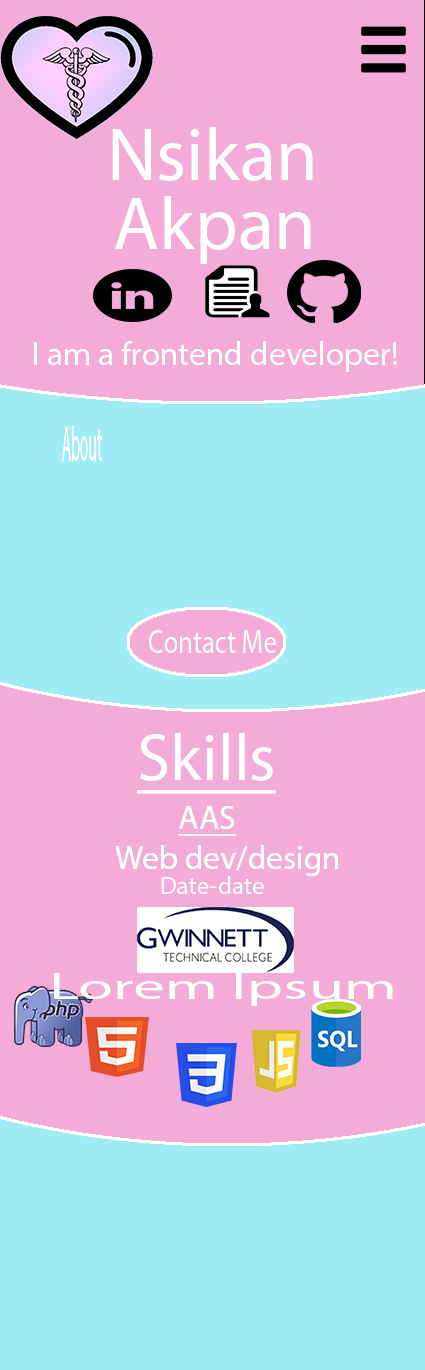
<style>
.page{position:relative;width:425px;height:1370px;background:#f3acd7}
.page>*{position:absolute;margin:0}
.t1{font:75px "MyriadPro-Regular";color:#ffffff}
.t2{font:33.3px "MyriadPro-Regular";color:#ffffff}
.t3{font:50px "MyriadPro-Regular";color:#ffffff;scale:0.31 1}
.t4{font:66.7px "MyriadPro-Regular";color:#ffffff;text-decoration:underline}
.t5{font:33.3px "MyriadPro-Regular";color:#ffffff;text-decoration:underline}
.t6{font:25px "MyriadPro-Regular";color:#ffffff}
.t7{font:37.4px "MyriadPro-Regular";color:#ffffff;scale:1.7 1}
</style>
<div class="page">
<p class="t1" style="left:112px;top:127px;width:201px;height:54px">Nsikan</p>
<p class="t1" style="left:115px;top:196px;width:196px;height:68px">Akpan</p>
<p class="t2" style="left:34px;top:341px;width:363px;height:31px">I am a frontend developer!</p>
<p class="t3" style="left:62px;top:425px;width:40px;height:36px">About</p>
<p class="t4" style="left:137px;top:733px;width:139px;height:61px">Skills</p>
<p class="t2" style="left:115px;top:806px;width:223px;height:70px"><span class="t5">AAS<br></span>Web dev/design</p>
<p class="t2" style="left:115px;top:806px;width:223px;height:70px"><span class="t5">AAS<br></span>Web dev/design</p>
<p class="t6" style="left:161px;top:876px;width:103px;height:18px">Date-date</p>
<p class="t7" style="left:54px;top:973px;width:339px;height:33px">Lorem Ipsum</p>
</div>
